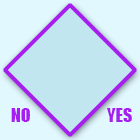
<style>
.page{position:relative;width:140px;height:140px;background:#c1e6ef}
.page>*{position:absolute;margin:0}
.t1{font:18px "Impact";color:#a71fee}
</style>
<div class="page">
<p class="t1" style="left:11px;top:108px;width:19px;height:14px">NO</p>
<p class="t1" style="left:107px;top:108px;width:25px;height:14px">YES</p>
</div>
